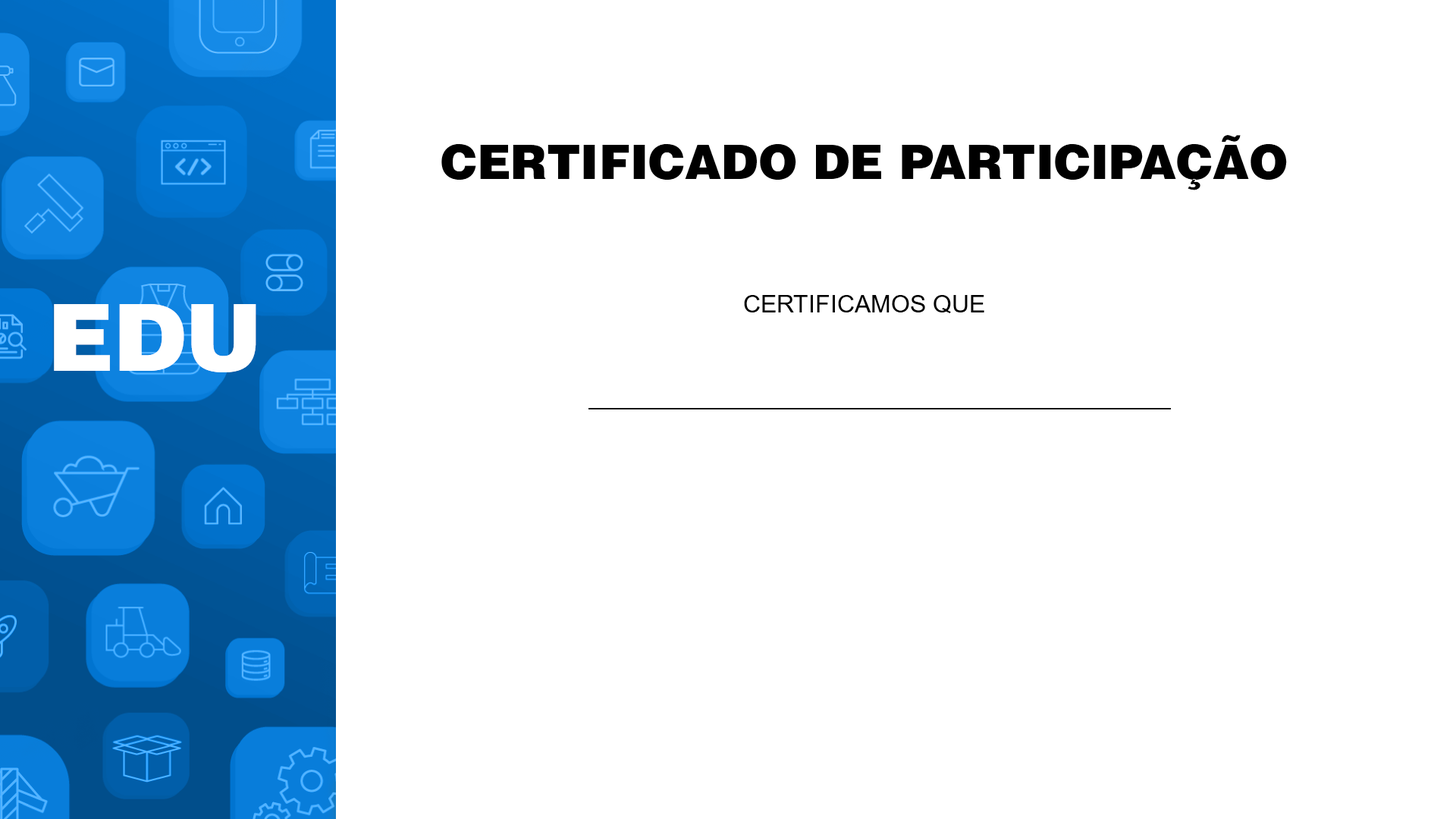
<style>
.page{position:relative;width:1456px;height:819px;background:#ffffff}
.page>*{position:absolute;margin:0}
.t1{font:47px "Helvetica-Black";color:#000000;text-transform:uppercase}
.t2{font:92.5px "Helvetica-Black";color:#ffffff;text-transform:uppercase}
.t3{font:24.3px "ArialMT";color:#000000;text-transform:uppercase}
.t4{font:24.3px "Helvetica-Black";color:#000000;text-transform:uppercase}
</style>
<div class="page">
<p class="t1" style="left:441px;top:135px;width:846px;height:55px">Certificado de participação</p>
<p class="t2" style="left:54px;top:304px;width:202px;height:68px">EDU</p>
<p class="t3" style="left:744px;top:295px;width:240px;height:18px">Certificamos que</p>
<p class="t4" style="left:588px;top:408px;width:583px;height:1px">________________________________________________</p>
</div>
